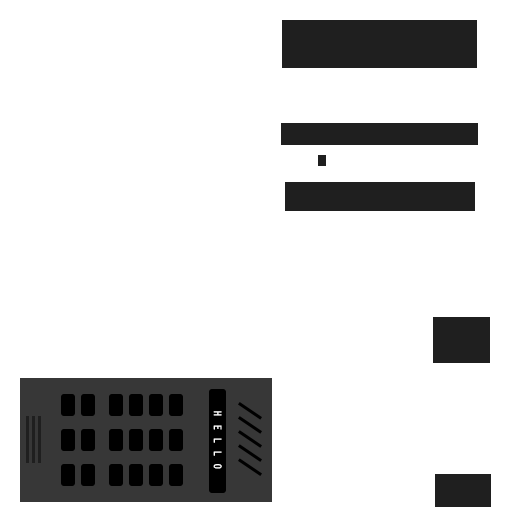
<style>
.page{position:relative;width:512px;height:512px;background:#ffffff}
.page>*{position:absolute;margin:0}
.t1{font:11px "OratorStd";color:#ffffff}
</style>
<div class="page">
<p class="t1" style="left:213px;top:411px;width:9px;height:58px;rotate:90deg">H E L L O</p>
</div>
